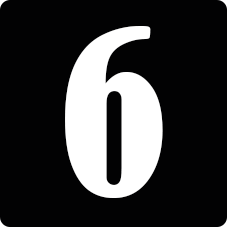
<style>
.page{position:relative;width:227px;height:227px;background:#020203}
.page>*{position:absolute;margin:0}
.t1{font:216px "BernardMT-Condensed";color:#ffffff}
</style>
<div class="page">
<p class="t1" style="left:65px;top:26px;width:98px;height:172px">6</p>
</div>
